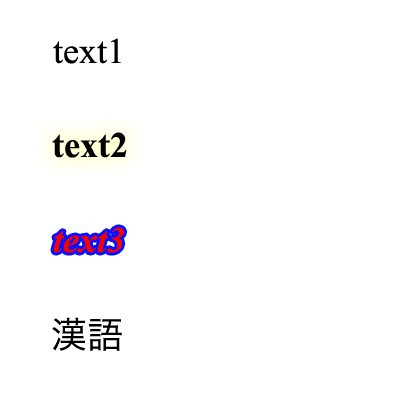
<style>
.page{position:relative;width:400px;height:400px;background:#ffffff}
.page>*{position:absolute;margin:0}
.t1{font:36px "TimesNewRomanPSMT";color:#000000}
.t2{font:36px "TimesNewRomanPS-BoldMT";color:#000000}
.t3{font:36px "TimesNewRomanPS-BoldItalicMT";color:#fc0000}
.t4{font:36px "HiraKakuProN-W3";color:#000000}
</style>
<div class="page">
<p class="t1" style="left:53px;top:38px;width:68px;height:26px">text1</p>
<p class="t2" style="left:52px;top:132px;width:75px;height:26px">text2</p>
<p class="t3" style="left:53px;top:227px;width:71px;height:26px">text3</p>
<p class="t4" style="left:52px;top:317px;width:70px;height:34px">漢語</p>
</div>
